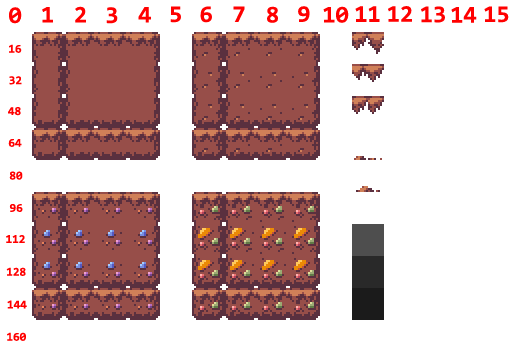
<style>
.page{position:relative;width:512px;height:352px;background:#ffffff}
.page>*{position:absolute;margin:0}
.t1{font:24px "Consolas-Bold";color:#ff0000}
.t2{font:12px "Consolas-Bold";color:#ff0000}
</style>
<div class="page">
<p class="t1" style="left:75px;top:6px;width:11px;height:17px">2</p>
<p class="t1" style="left:170px;top:6px;width:11px;height:17px">5</p>
<p class="t1" style="left:200px;top:6px;width:12px;height:17px">6</p>
<p class="t1" style="left:233px;top:6px;width:12px;height:16px">7</p>
<p class="t1" style="left:267px;top:6px;width:11px;height:17px">8</p>
<p class="t1" style="left:298px;top:6px;width:12px;height:16px">9</p>
<p class="t1" style="left:323px;top:6px;width:26px;height:17px">10</p>
<p class="t1" style="left:355px;top:6px;width:25px;height:16px">11</p>
<p class="t1" style="left:388px;top:6px;width:24px;height:16px">12</p>
<p class="t1" style="left:421px;top:6px;width:24px;height:17px">13</p>
<p class="t1" style="left:484px;top:6px;width:25px;height:17px">15</p>
<p class="t1" style="left:9px;top:7px;width:13px;height:17px">0</p>
<p class="t1" style="left:42px;top:7px;width:11px;height:16px">1</p>
<p class="t1" style="left:106px;top:7px;width:12px;height:17px">3</p>
<p class="t1" style="left:138px;top:7px;width:13px;height:16px">4</p>
<p class="t1" style="left:451px;top:7px;width:26px;height:16px">14</p>
<p class="t2" style="left:9px;top:44px;width:13px;height:9px">16</p>
<p class="t2" style="left:9px;top:76px;width:13px;height:9px">32</p>
<p class="t2" style="left:8px;top:107px;width:13px;height:9px">48</p>
<p class="t2" style="left:8px;top:139px;width:14px;height:8px">64</p>
<p class="t2" style="left:9px;top:171px;width:14px;height:9px">80</p>
<p class="t2" style="left:9px;top:204px;width:14px;height:8px">96</p>
<p class="t2" style="left:6px;top:235px;width:19px;height:8px">112</p>
<p class="t2" style="left:6px;top:267px;width:20px;height:9px">128</p>
<p class="t2" style="left:7px;top:300px;width:20px;height:9px">144</p>
<p class="t2" style="left:7px;top:332px;width:19px;height:9px">160</p>
</div>
